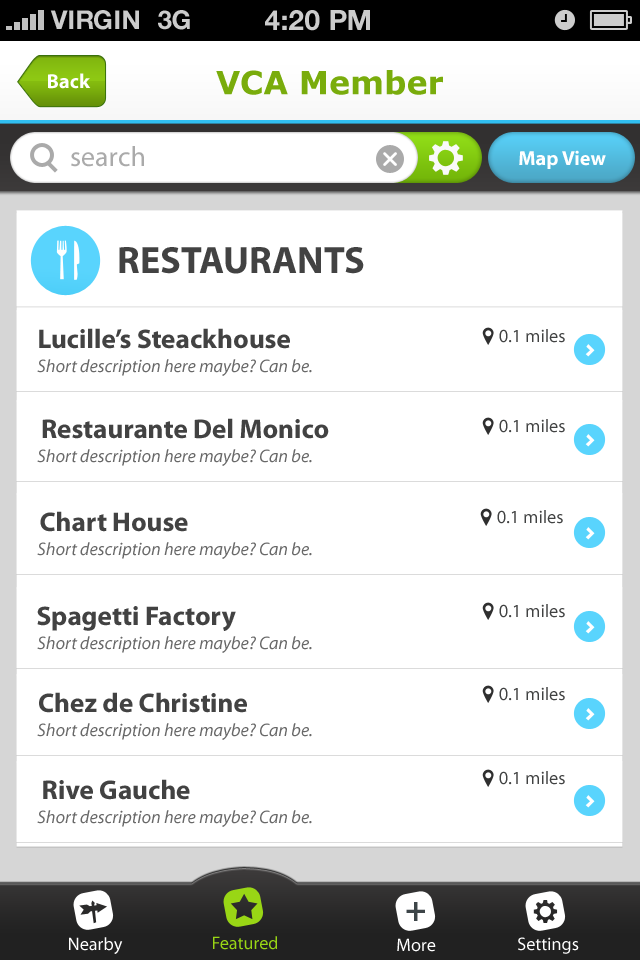
<style>
.page{position:relative;width:640px;height:960px;background:#ffffff}
.page>*{position:absolute;margin:0}
.t1{font:26px "HelveticaNeue-Bold";color:#cccccc;text-transform:uppercase}
.t2{font:28px "HelveticaNeue-Bold";color:#cccccc;text-transform:uppercase}
.t3{font:20.4px "MyriadPro-Bold";color:#ffffff}
.t4{font:31.9px "Verdana-Bold";color:#79ac0c}
.t5{font:28px "MyriadPro-Regular";color:#aaaaaa}
.t6{font:38.4px "MyriadPro-Bold";color:#424242}
.t7{font:27.2px "MyriadPro-Bold";color:#424242}
.t8{font:18.3px "MyriadPro-Regular";color:#414242}
.t9{font:18.1px "MyriadPro-It";color:#686868}
.t10{font:36px "MyriadPro-Bold";color:#3d4548}
.t11{font:18.1px "MyriadPro-Regular";color:#ffffff}
.t12{font:18.1px "MyriadPro-Regular";color:#99d615}
</style>
<div class="page">
<p class="t1" style="left:50px;top:10px;width:89px;height:20px">VIRGIN</p>
<p class="t1" style="left:158px;top:10px;width:32px;height:20px">3G</p>
<p class="t2" style="left:265px;top:10px;width:105px;height:21px">4:20 pM</p>
<p class="t3" style="left:48px;top:73px;width:43px;height:16px">Back</p>
<p class="t4" style="left:216px;top:70px;width:227px;height:25px">VCA Member</p>
<p class="t5" style="left:71px;top:146px;width:73px;height:21px">search</p>
<p class="t3" style="left:519px;top:150px;width:87px;height:19px">Map View</p>
<p class="t6" style="left:119px;top:247px;width:245px;height:27px">RESTAURANTS</p>
<p class="t7" style="left:39px;top:328px;width:251px;height:21px">Lucille’s Steackhouse</p>
<p class="t8" style="left:499px;top:329px;width:66px;height:14px">0.1 miles</p>
<p class="t9" style="left:37px;top:359px;width:275px;height:17px">Short description here maybe? Can be.</p>
<p class="t7" style="left:42px;top:418px;width:287px;height:21px">Restaurante Del Monico</p>
<p class="t8" style="left:499px;top:419px;width:66px;height:14px">0.1 miles</p>
<p class="t9" style="left:37px;top:449px;width:275px;height:17px">Short description here maybe? Can be.</p>
<p class="t8" style="left:497px;top:510px;width:66px;height:14px">0.1 miles</p>
<p class="t7" style="left:40px;top:511px;width:148px;height:21px">Chart House</p>
<p class="t9" style="left:37px;top:542px;width:275px;height:17px">Short description here maybe? Can be.</p>
<p class="t7" style="left:37px;top:606px;width:199px;height:25px">Spagetti Factory</p>
<p class="t8" style="left:499px;top:604px;width:66px;height:14px">0.1 miles</p>
<p class="t9" style="left:37px;top:636px;width:275px;height:17px">Short description here maybe? Can be.</p>
<p class="t8" style="left:499px;top:687px;width:66px;height:14px">0.1 miles</p>
<p class="t7" style="left:39px;top:692px;width:208px;height:21px">Chez de Christine</p>
<p class="t9" style="left:37px;top:723px;width:275px;height:17px">Short description here maybe? Can be.</p>
<p class="t8" style="left:499px;top:771px;width:66px;height:14px">0.1 miles</p>
<p class="t7" style="left:43px;top:779px;width:147px;height:21px">Rive Gauche</p>
<p class="t9" style="left:37px;top:810px;width:275px;height:17px">Short description here maybe? Can be.</p>
<p class="t10" style="left:406px;top:902px;width:19px;height:19px">+</p>
<p class="t11" style="left:69px;top:937px;width:54px;height:17px">Nearby</p>
<p class="t12" style="left:213px;top:936px;width:64px;height:14px">Featured</p>
<p class="t11" style="left:397px;top:938px;width:39px;height:14px">More</p>
<p class="t11" style="left:518px;top:937px;width:61px;height:17px">Settings</p>
</div>
